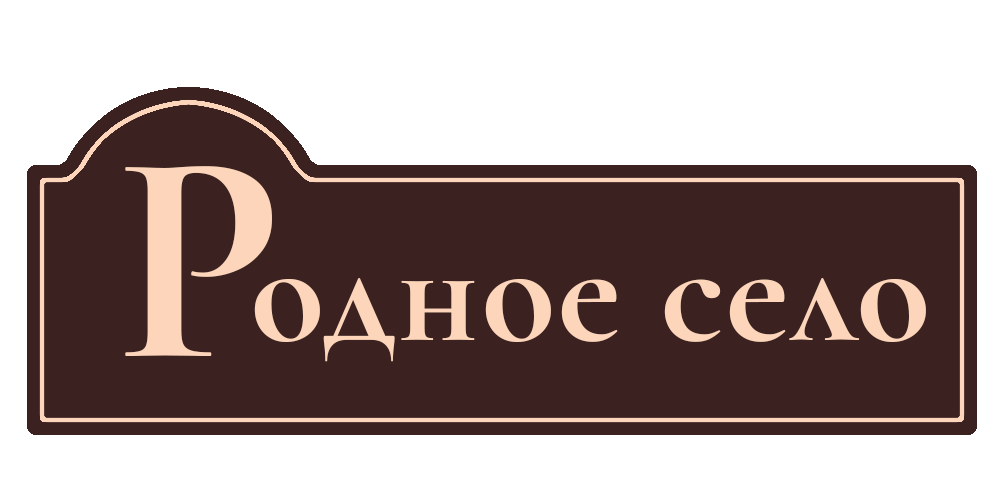
<style>
.page{position:relative;width:1000px;height:500px;background:#3c2121}
.page>*{position:absolute;margin:0}
.t1{font:302.2px "CormorantGaramond-Bold";letter-spacing:0.01em;color:#fdd6bb}
.t2{font:152.9px "CormorantGaramond-Bold";letter-spacing:0.01em;color:#fdd6bb}
.t3{font:231.1px "CormorantGaramond-Bold";letter-spacing:0.01em;color:#fdd6bb}
</style>
<div class="page">
<p class="t1" style="left:125px;top:166px;width:147px;height:190px">Р</p>
<p class="t2" style="left:254px;top:278px;width:672px;height:84px"><span class="t3"><br></span>одное село</p>
</div>
